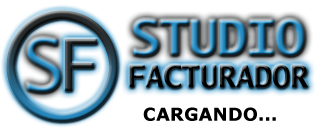
<style>
.page{position:relative;width:320px;height:128px;background:#ffffff}
.page>*{position:absolute;margin:0}
.t1{font:48px "LucidaSans-TypewriterBold";text-transform:uppercase}
.t2{font:30px "LucidaSans-TypewriterBold";color:#000000;text-transform:uppercase}
.t3{font:18px "Verdana-Bold";color:#000000;text-transform:uppercase}
</style>
<div class="page">
<p class="t1" style="left:133px;top:19px;width:172px;height:37px">studio</p>
<p class="t2" style="left:129px;top:65px;width:179px;height:23px">facturador</p>
<p class="t3" style="left:143px;top:107px;width:133px;height:14px">Cargando...</p>
</div>
